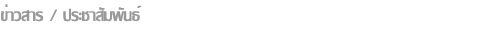
<style>
.page{position:relative;width:500px;height:30px;background:#ffffff}
.page>*{position:absolute;margin:0}
.t1{font:24px "LilyUPC";color:#999999}
</style>
<div class="page">
<p class="t1" style="left:0px;top:4px;width:142px;height:18px">ข่าวสาร / ประชาสัมพันธ์</p>
</div>
